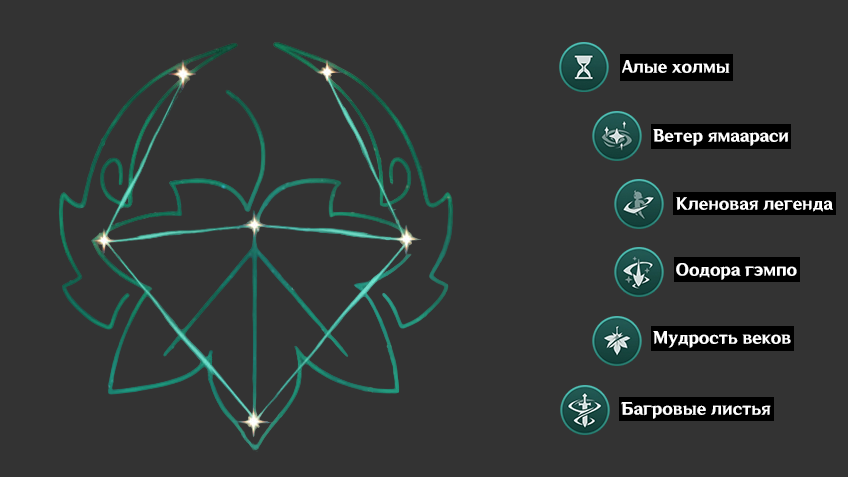
<style>
.page{position:relative;width:848px;height:477px;background:#333333}
.page>*{position:absolute;margin:0}
.t1{font:16px "Default_SC-85W";color:#ffffff}
</style>
<div class="page">
<p class="t1" style="left:622px;top:60px;width:108px;height:13px">Алые холмы</p>
<p class="t1" style="left:653px;top:129px;width:136px;height:17px">Ветер ямаараси</p>
<p class="t1" style="left:676px;top:197px;width:157px;height:15px">Кленовая легенда</p>
<p class="t1" style="left:676px;top:263px;width:121px;height:17px">Оодора гэмпо</p>
<p class="t1" style="left:653px;top:331px;width:138px;height:17px">Мудрость веков</p>
<p class="t1" style="left:621px;top:402px;width:150px;height:17px">Багровые листья</p>
</div>
